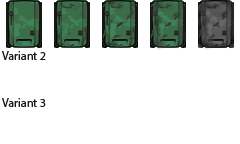
<style>
.page{position:relative;width:240px;height:144px;background:#ffffff}
.page>*{position:absolute;margin:0}
.t1{font:12px "MyriadPro-Regular";color:#191919}
</style>
<div class="page">
<p class="t1" style="left:2px;top:51px;width:44px;height:9px">Variant 2</p>
<p class="t1" style="left:2px;top:98px;width:44px;height:9px">Variant 3</p>
</div>
